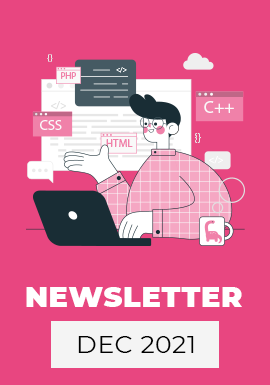
<style>
.page{position:relative;width:270px;height:385px;background:#e84680}
.page>*{position:absolute;margin:0}
.t1{font:28.8px "Montserrat-Black";letter-spacing:0.025em;color:#ffffff;text-transform:uppercase}
.t2{font:25px "Montserrat-Regular";letter-spacing:0.025em;color:#000000;text-transform:uppercase}
</style>
<div class="page">
<p class="t1" style="left:26px;top:287px;width:216px;height:20px">newsletter</p>
<p class="t2" style="left:78px;top:336px;width:116px;height:17px">DEC 2021</p>
</div>
